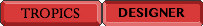
<style>
.page{position:relative;width:203px;height:26px;background:#d83939}
.page>*{position:absolute;margin:0}
.t1{font:16px "Perpetua";color:#000000}
.t2{font:12px "MyanmarMN-Bold";color:#000000}
</style>
<div class="page">
<p class="t1" style="left:21px;top:8px;width:59px;height:11px">TROPICS</p>
<p class="t2" style="left:118px;top:7px;width:67px;height:11px">DESIGNER</p>
</div>
